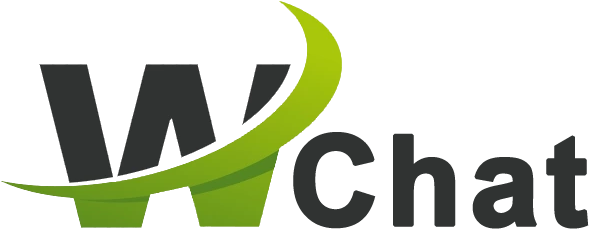
<style>
.page{position:relative;width:600px;height:250px;background:#ffffff}
.page>*{position:absolute;margin:0}
.t1{font:125px "Arial-BoldMT";letter-spacing:0.03em;color:#303332;font-weight:bold}
</style>
<div class="page">
<p class="t1" style="left:293px;top:132px;width:296px;height:97px">Chat</p>
</div>
